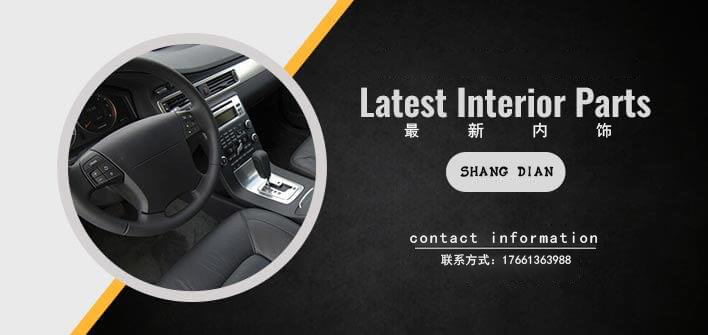
<style>
.page{position:relative;width:708px;height:335px}
.page>*{position:absolute;margin:0}
.t1{font:16px "SimHei";letter-spacing:3.005em;color:#f4f4f4}
.t2{font:16px "SXS-Cuanbaozi";letter-spacing:0.005em;color:#100d0d;font-weight:bold}
.t3{font:16px "SimHei";letter-spacing:0.125em;color:#f4f4f4}
.t4{font:12px "SimHei";letter-spacing:0.025em;color:#f4f4f4}
</style>
<div class="page">
<p class="t1" style="left:404px;top:122px;width:208px;height:16px">最新内饰</p>
<p class="t2" style="left:460px;top:166px;width:94px;height:11px">SHANG DIAN</p>
<p class="t3" style="left:410px;top:231px;width:187px;height:12px">contact information</p>
<p class="t4" style="left:441px;top:254px;width:130px;height:12px">联系方式：17661363988</p>
</div>
